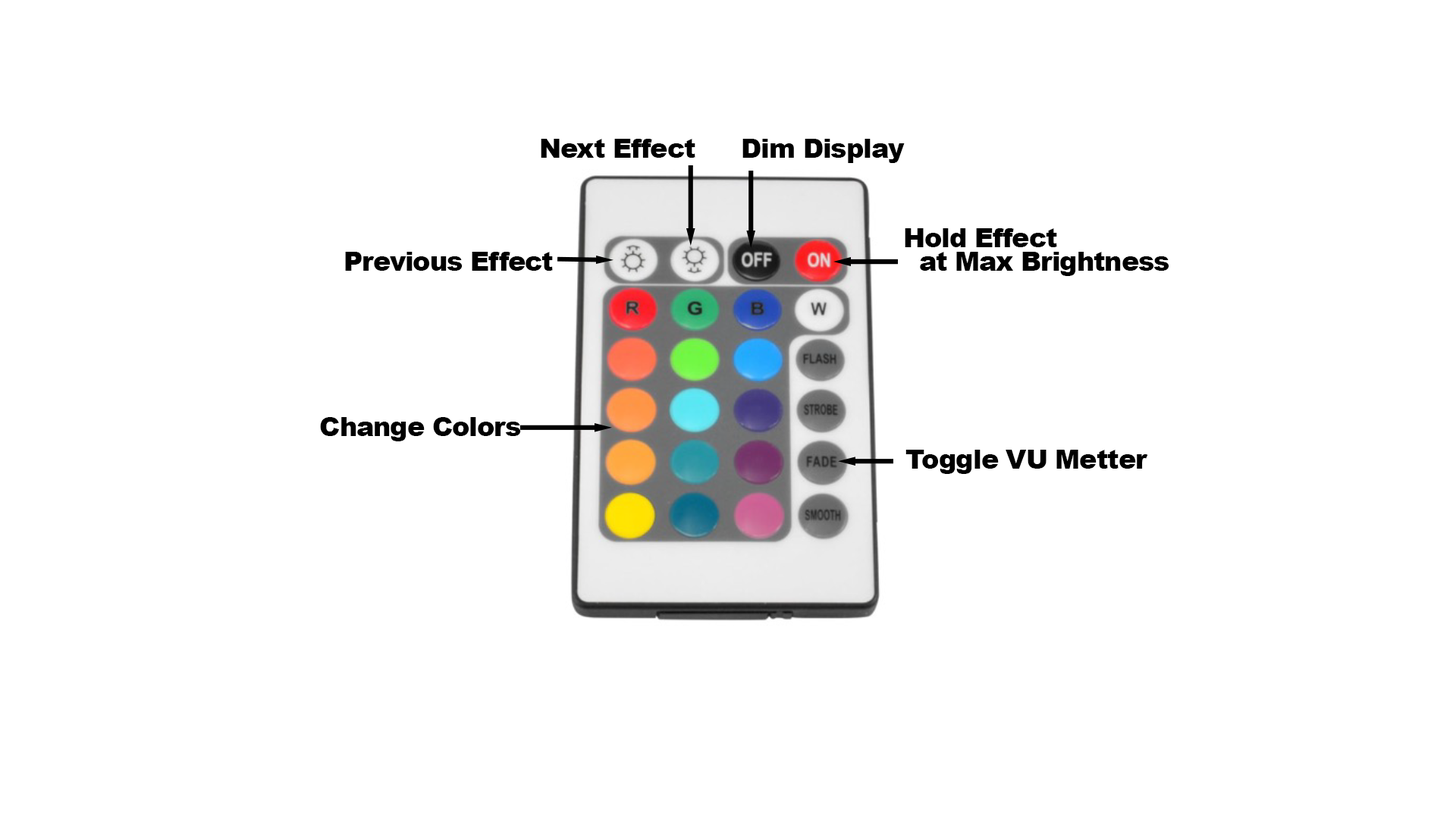
<style>
.page{position:relative;width:1456px;height:819px;background:#ffffff}
.page>*{position:absolute;margin:0}
.t1{font:26.5px "Arial-Black";letter-spacing:-0.03em;color:#000000}
.t2{font:26.5px/23.5px "Arial-Black";letter-spacing:-0.03em;color:#000000}
</style>
<div class="page">
<p class="t1" style="left:541px;top:139px;width:154px;height:19px">Next Effect</p>
<p class="t1" style="left:742px;top:139px;width:163px;height:24px">Dim Display</p>
<p class="t2" style="left:905px;top:228px;width:264px;height:48px">Hold Effect<br>  at Max Brightness</p>
<p class="t1" style="left:345px;top:252px;width:208px;height:19px">Previous Effect</p>
<p class="t1" style="left:320px;top:417px;width:201px;height:24px">Change Colors</p>
<p class="t1" style="left:905px;top:450px;width:243px;height:24px">Toggle VU Metter</p>
</div>
